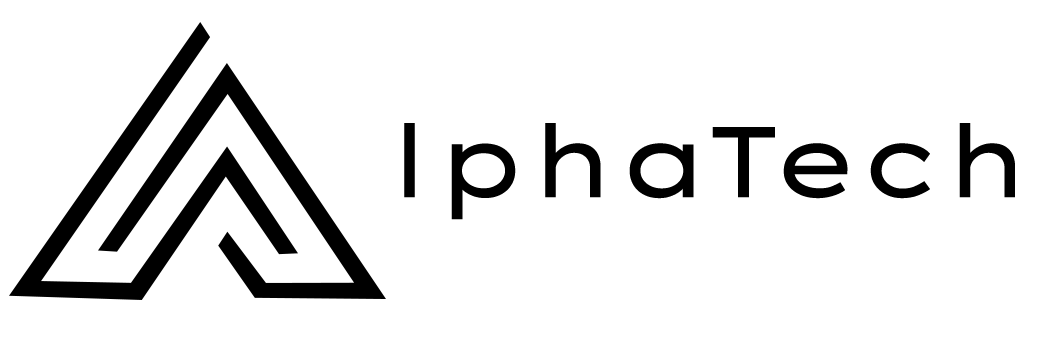
<style>
.page{position:relative;width:1056px;height:340px;background:#ffffff}
.page>*{position:absolute;margin:0}
.t1{font:100px "LexendTera-Regular";color:#000000}
</style>
<div class="page">
<p class="t1" style="left:404px;top:123px;width:611px;height:97px">lphaTech</p>
</div>
